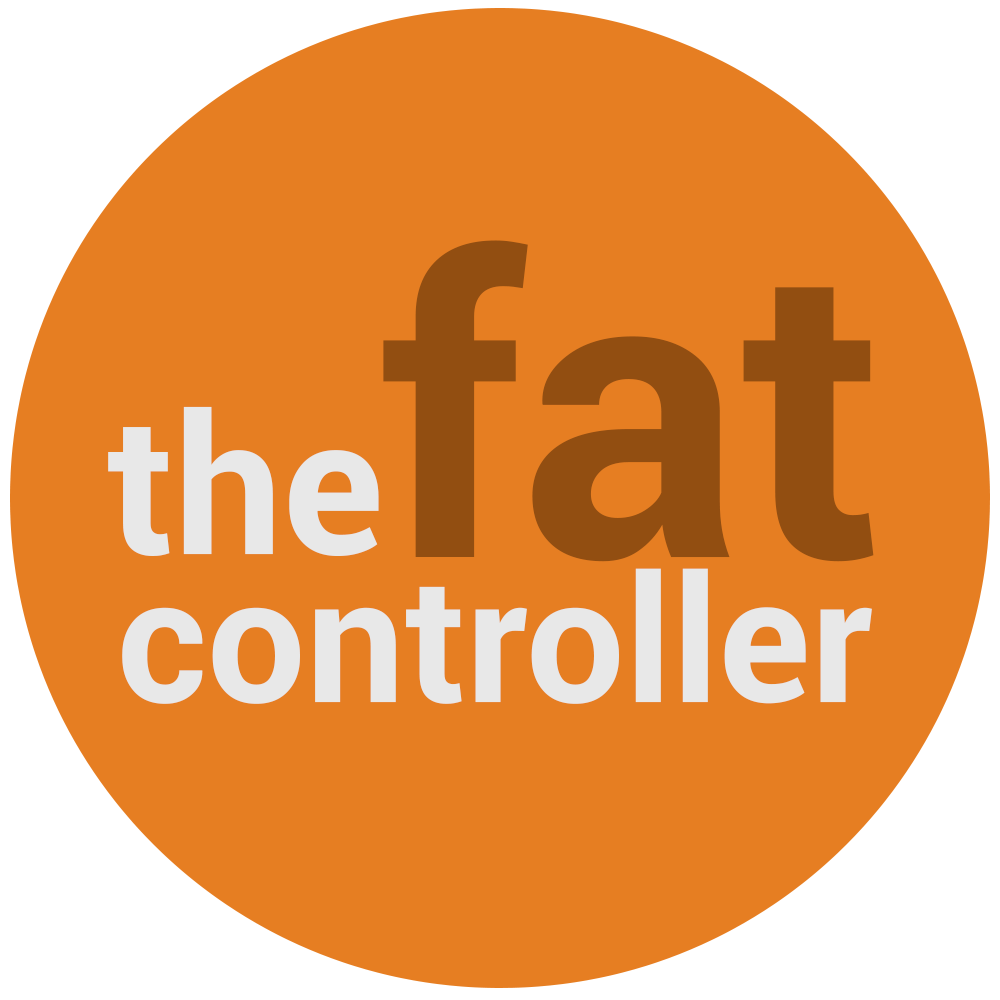
<style>
.page{position:relative;width:1000px;height:1000px;background:#e67e22}
.page>*{position:absolute;margin:0}
.t1{font:410px "Roboto-Bold";color:#924e11}
.t2{font:193px "Roboto-Bold";color:#e8e8e8}
.t3{font:175px "Roboto-Bold";color:#e8e8e8}
</style>
<div class="page">
<p class="t1" style="left:383px;top:240px;width:491px;height:322px">fat</p>
<p class="t2" style="left:108px;top:406px;width:271px;height:150px">the</p>
<p class="t3" style="left:122px;top:568px;width:750px;height:136px">controller</p>
</div>
